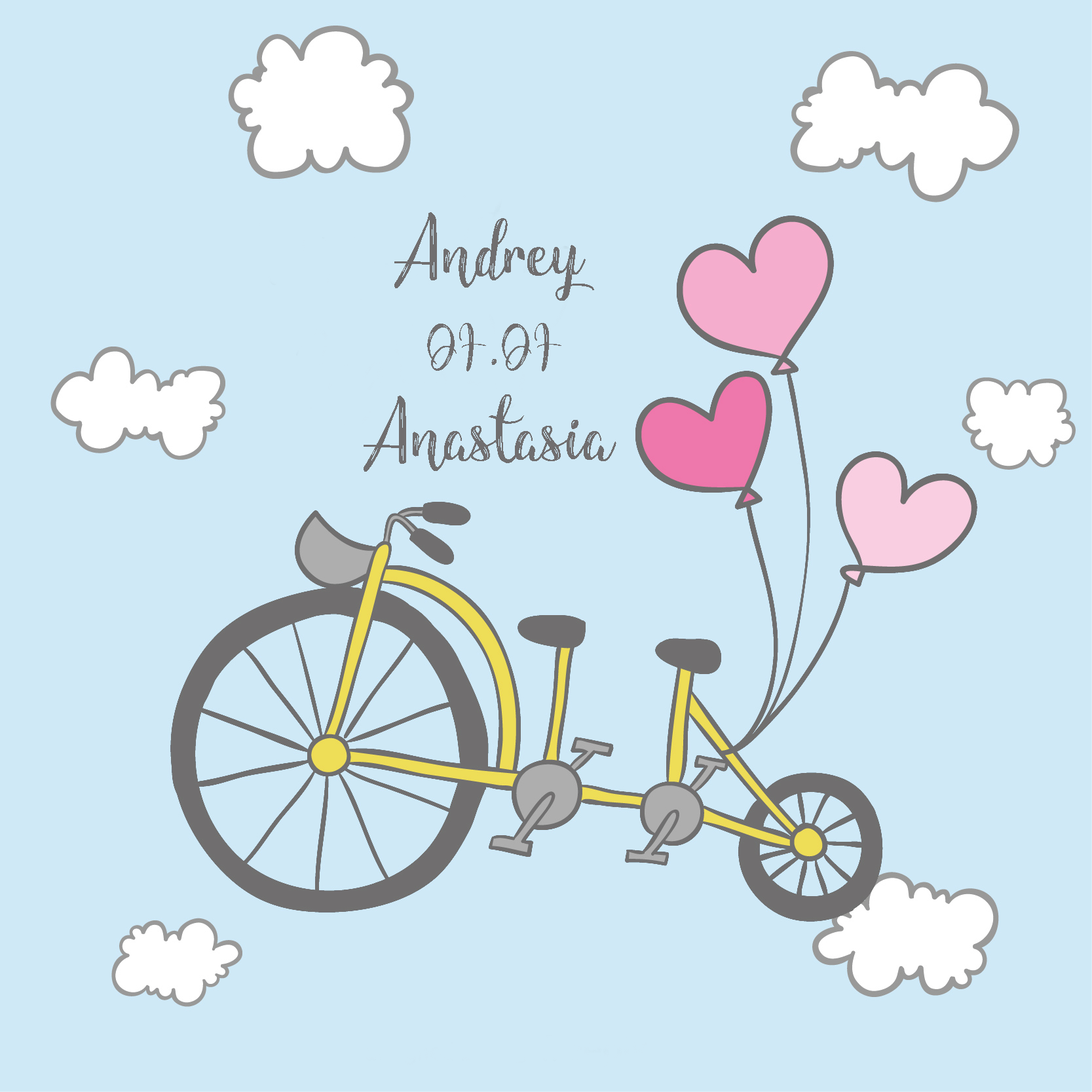
<style>
.page{position:relative;width:1092px;height:1092px;background:#cfe9f6}
.page>*{position:absolute;margin:0}
.t1{font:98.3px "Children-of-theStarlight";color:#706e6f}
.t2{font:65.5px "Children-of-theStarlight";color:#706e6f}
</style>
<div class="page">
<p class="t1" style="left:394px;top:212px;width:200px;height:89px">Andrey</p>
<p class="t2" style="left:427px;top:323px;width:134px;height:48px">07.07</p>
<p class="t1" style="left:364px;top:394px;width:252px;height:78px">Anastasia</p>
</div>
